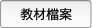
<style>
.page{position:relative;width:92px;height:28px}
.page>*{position:absolute;margin:0}
.t1{font:13px "HiraginoSansGB-W3";color:#000000}
</style>
<div class="page">
<p class="t1" style="left:20px;top:8px;width:52px;height:13px">教材檔案</p>
</div>
